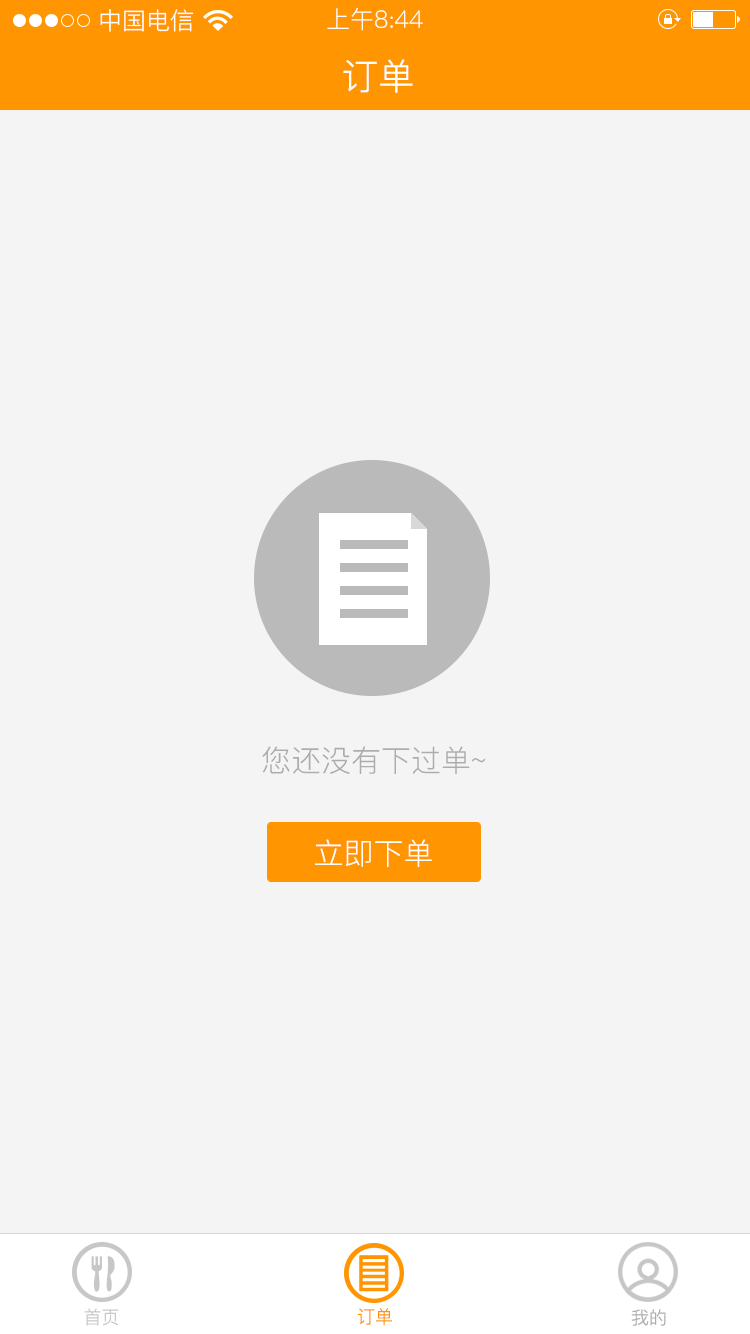
<style>
.page{position:relative;width:750px;height:1334px;background:#f4f4f4}
.page>*{position:absolute;margin:0}
.t1{font:24px "PingFang-SC-Regular";color:#ffffff}
.t2{font:36px "PingFang-SC-Regular";letter-spacing:0.01em;color:#ffffff}
.t3{font:30px "PingFang-SC-Regular";color:#acacac}
.t4{font:30px "PingFang-SC-Regular";color:#ffffff}
.t5{font:18px "PingFang-SC-Regular";color:#c8c7c7}
.t6{font:18px "PingFang-SC-Regular";color:#ff9500}
.t7{font:18px "PingFang-SC-Regular";color:#acacac}
</style>
<div class="page">
<p class="t1" style="left:100px;top:9px;width:94px;height:23px">中国电信</p>
<p class="t1" style="left:327px;top:8px;width:96px;height:23px">上午8:44</p>
<p class="t2" style="left:343px;top:59px;width:70px;height:34px">订单</p>
<p class="t3" style="left:262px;top:746px;width:224px;height:28px">您还没有下过单~</p>
<p class="t4" style="left:315px;top:839px;width:117px;height:28px">立即下单</p>
<p class="t5" style="left:84px;top:1308px;width:35px;height:18px">首页</p>
<p class="t6" style="left:357px;top:1308px;width:35px;height:17px">订单</p>
<p class="t7" style="left:631px;top:1309px;width:35px;height:17px">我的</p>
</div>
